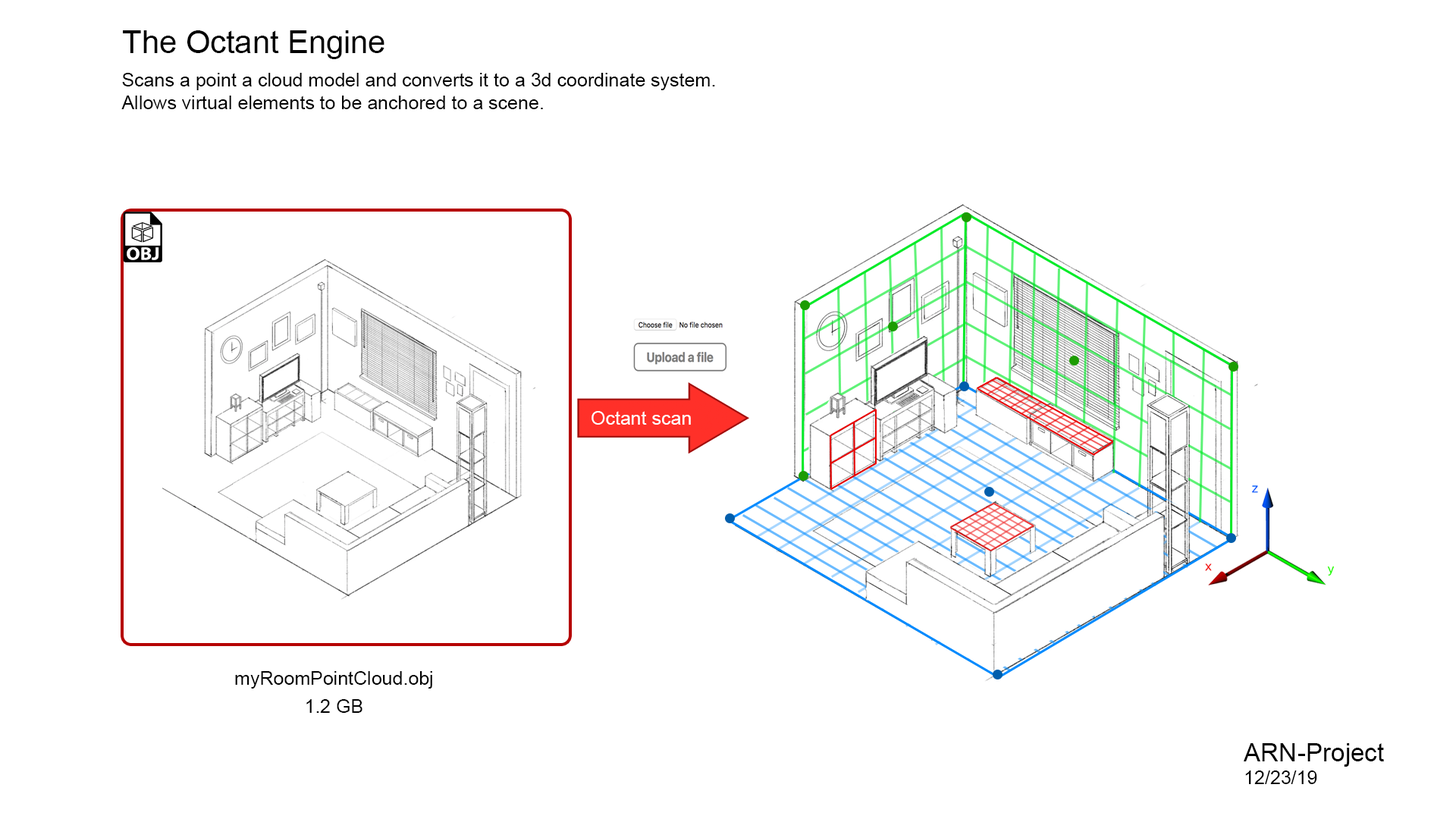
<style>
.page{position:relative;width:1456px;height:819px;background:#ffffff}
.page>*{position:absolute;margin:0}
.t1{font:31.6px "ArialMT";color:#000000}
.t2{font:19px "ArialMT";color:#000000}
.t3{font:19px "ArialMT";color:#ffffff}
.t4{font:25.3px "ArialMT";color:#000000}
</style>
<div class="page">
<p class="t1" style="left:123px;top:30px;width:261px;height:29px">The Octant Engine</p>
<p class="t2" style="left:121px;top:73px;width:594px;height:36px">Scans a point a cloud model and converts it to a 3d coordinate system.<br>Allows virtual elements to be anchored to a scene.</p>
<p class="t3" style="left:591px;top:411px;width:100px;height:14px">Octant scan</p>
<p class="t2" style="left:235px;top:671px;width:197px;height:18px">myRoomPointCloud.obj</p>
<p class="t2" style="left:306px;top:699px;width:56px;height:14px">1.2 GB</p>
<p class="t4" style="left:1244px;top:743px;width:140px;height:41px">ARN-Project<br><span class="t2">12/23/19</span></p>
</div>
